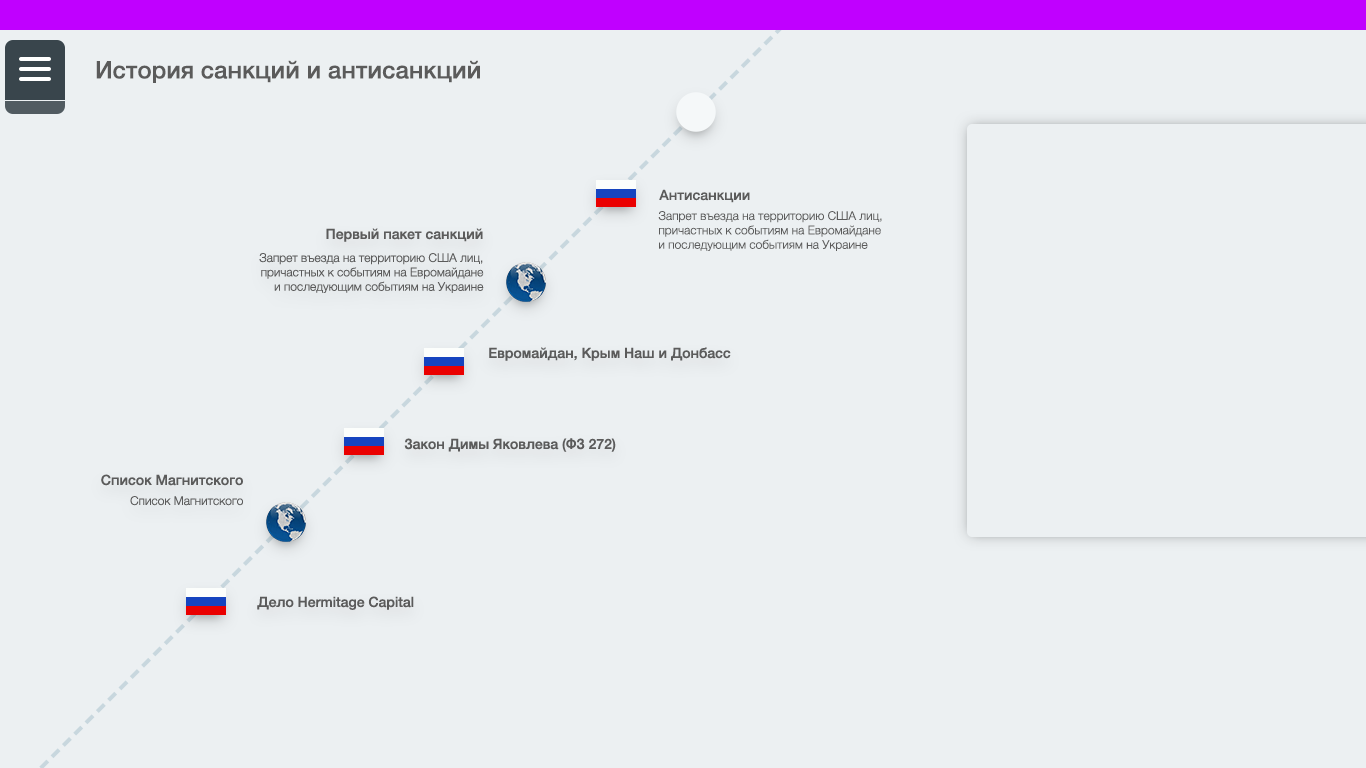
<style>
.page{position:relative;width:1366px;height:768px;background:#ecf0f2}
.page>*{position:absolute;margin:0}
.t1{font:24px "HelveticaNeue-Medium";color:#5b5b5b}
.t2{font:14px "HelveticaNeue-Medium";color:#5b5b5b}
.t3{font:12px "HelveticaNeue-Light";color:#5b5b5b}
</style>
<div class="page">
<p class="t1" style="left:96px;top:60px;width:384px;height:23px">История санкций и антисанкций</p>
<p class="t2" style="left:659px;top:189px;width:91px;height:14px">Антисанкции</p>
<p class="t3" style="left:658px;top:211px;width:224px;height:40px">Запрет въезда на территорию США лиц,<br>причастных к событиям на Евромайдане<br>и последующим событиям на Украине</p>
<p class="t2" style="left:326px;top:228px;width:157px;height:14px">Первый пакет санкций</p>
<p class="t3" style="left:259px;top:253px;width:225px;height:40px;text-align:right">Запрет въезда на территорию США лиц,<br>причастных к событиям на Евромайдане<br>и последующим событиям на Украине</p>
<p class="t2" style="left:489px;top:347px;width:242px;height:14px">Евромайдан, Крым Наш и Донбасс</p>
<p class="t2" style="left:404px;top:438px;width:212px;height:14px">Закон Димы Яковлева (ФЗ 272)</p>
<p class="t2" style="left:101px;top:474px;width:142px;height:12px">Список Магнитского</p>
<p class="t3" style="left:130px;top:496px;width:113px;height:10px">Список Магнитского</p>
<p class="t2" style="left:257px;top:596px;width:157px;height:14px">Дело Hermitage Capital</p>
</div>
